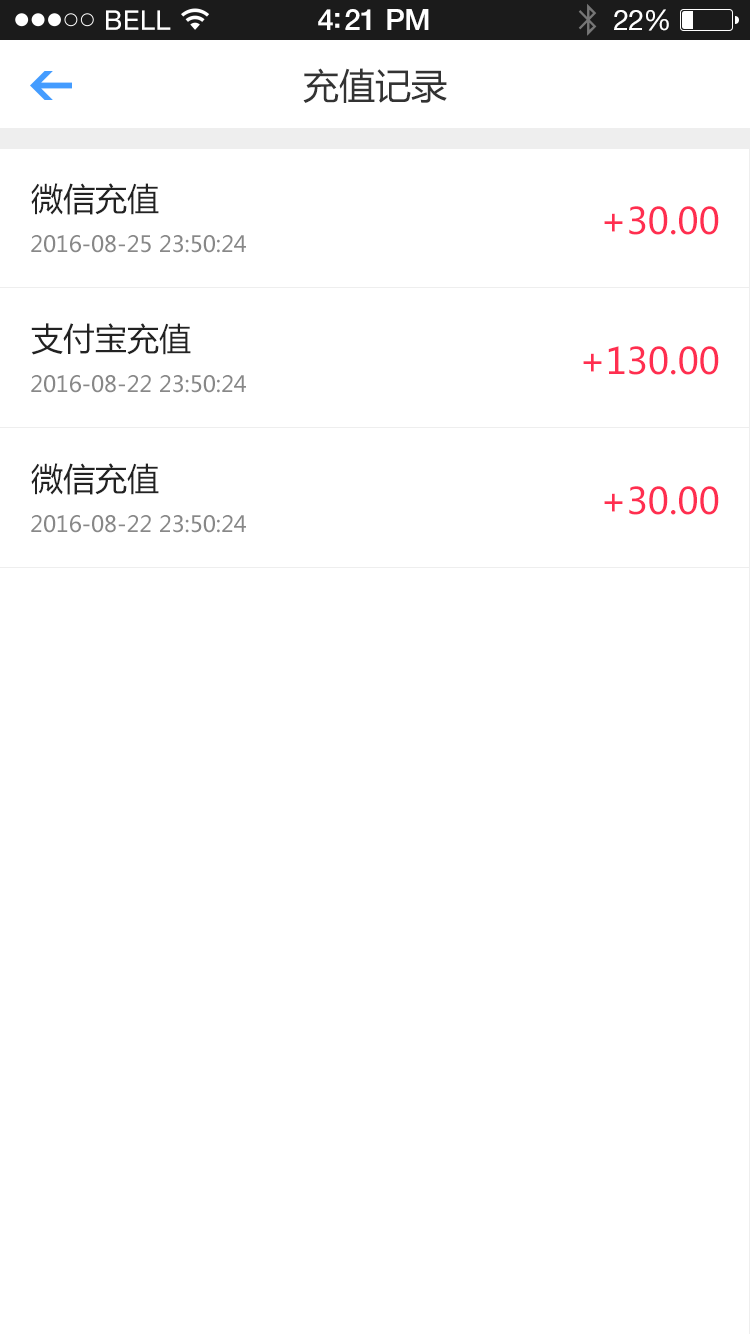
<style>
.page{position:relative;width:750px;height:1334px;background:#ffffff}
.page>*{position:absolute;margin:0}
.t1{font:36px "MicrosoftYaHei";color:#333333}
.t2{font:32px "MicrosoftYaHei";color:#222222}
.t3{font:36px "MicrosoftYaHei";color:#ff2e50}
.t4{font:22px "MicrosoftYaHei";color:#888888}
</style>
<div class="page">
<p class="t1" style="left:303px;top:68px;width:144px;height:35px">充值记录</p>
<p class="t2" style="left:31px;top:183px;width:128px;height:32px">微信充值</p>
<p class="t3" style="left:604px;top:206px;width:115px;height:29px">+30.00</p>
<p class="t4" style="left:31px;top:235px;width:215px;height:18px">2016-08-25 23:50:24</p>
<p class="t2" style="left:31px;top:323px;width:160px;height:32px">支付宝充值</p>
<p class="t3" style="left:583px;top:346px;width:136px;height:29px">+130.00</p>
<p class="t4" style="left:31px;top:375px;width:215px;height:18px">2016-08-22 23:50:24</p>
<p class="t2" style="left:31px;top:463px;width:128px;height:32px">微信充值</p>
<p class="t3" style="left:604px;top:486px;width:115px;height:29px">+30.00</p>
<p class="t4" style="left:31px;top:515px;width:215px;height:18px">2016-08-22 23:50:24</p>
</div>
